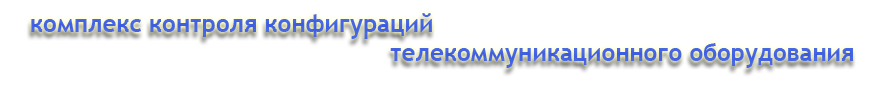
<style>
.page{position:relative;width:880px;height:85px;background:#ffffff}
.page>*{position:absolute;margin:0}
.t1{font:24px "TrebuchetMS-Bold";color:#3b62e1}
</style>
<div class="page">
<p class="t1" style="left:31px;top:13px;width:822px;height:55px">комплекс контроля конфигураций <br>          телекоммуникационного оборудования</p>
</div>
